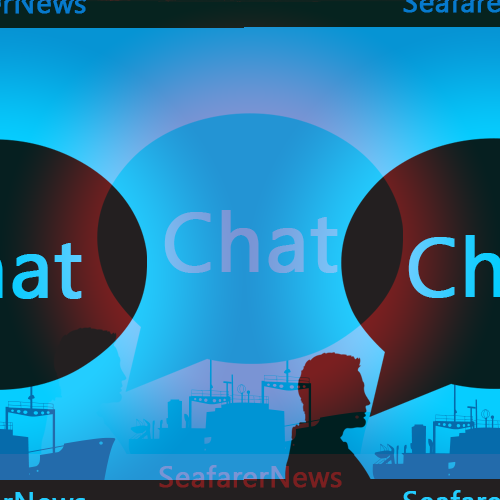
<style>
.page{position:relative;width:500px;height:500px}
.page>*{position:absolute;margin:0}
.t1{font:83.3px "SegoeUISymbol";color:#7aa9e4;font-weight:bold}
.t2{font:29.2px "SegoeUISymbol";font-weight:bold}
</style>
<div class="page">
<p class="t1" style="left:164px;top:208px;width:174px;height:63px">Chat</p>
<p class="t2" style="left:159px;top:463px;width:183px;height:23px">SeafarerNews</p>
</div>
